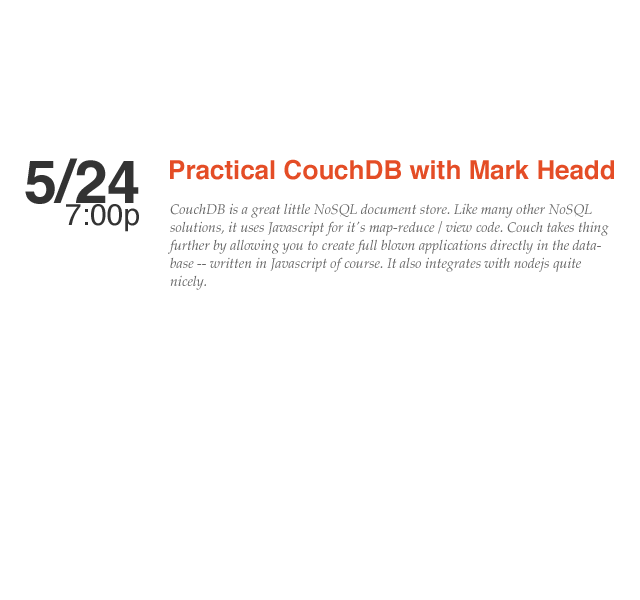
<style>
.page{position:relative;width:640px;height:600px;background:#ffffff}
.page>*{position:absolute;margin:0}
.t1{font:60px "Helvetica-Bold";color:#333333}
.t2{font:26px "Helvetica-Bold";color:#e44d26}
.t3{font:30px "Helvetica";color:#333333}
.t4{font:14px/18px "Palatino-Italic";color:#666666}
</style>
<div class="page">
<p class="t1" style="left:25px;top:158px;width:114px;height:46px">5/24</p>
<p class="t2" style="left:170px;top:159px;width:444px;height:21px">Practical CouchDB with Mark Headd</p>
<p class="t3" style="left:66px;top:204px;width:73px;height:28px">7:00p</p>
<p class="t4" style="left:168px;top:203px;width:441px;height:87px">CouchDB is a great little NoSQL document store. Like many other NoSQL solutions, it uses Javascript for it's map-reduce / view code. Couch takes thing further by allowing you to create full blown applications directly in the database -- written in Javascript of course. It also integrates with nodejs quite nicely.</p>
</div>
